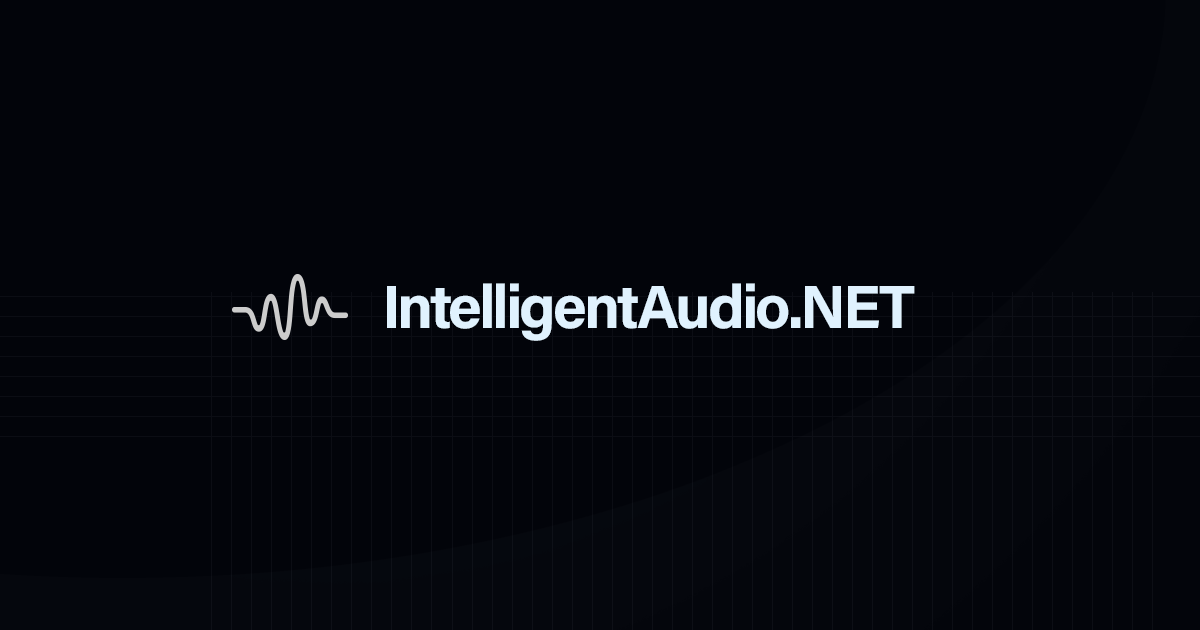
<style>
.page{position:relative;width:1200px;height:630px;background:#02040a}
.page>*{position:absolute;margin:0}
.t1{font:61px "AcuminConcept-Bold";letter-spacing:-0.05em;color:#e0f2fe}
</style>
<div class="page">
<p class="t1" style="left:387px;top:283px;width:528px;height:58px">IntelligentAudio.NET</p>
</div>
